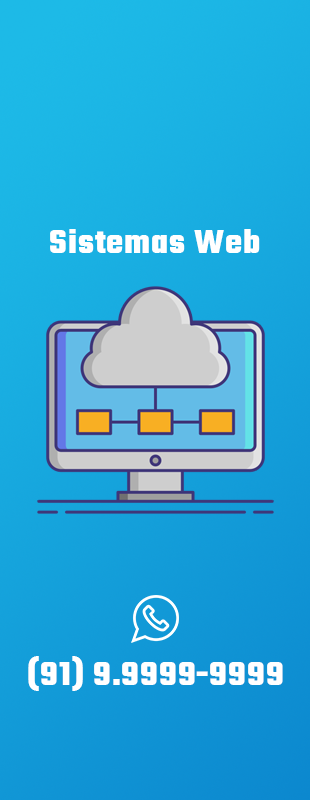
<style>
.page{position:relative;width:310px;height:800px}
.page>*{position:absolute;margin:0}
.t1{font:36px "Teko-Bold";letter-spacing:0.025em;color:#ffffff}
</style>
<div class="page">
<p class="t1" style="left:50px;top:229px;width:210px;height:24px">Sistemas Web</p>
<p class="t1" style="left:28px;top:656px;width:255px;height:35px">(91) 9.9999-9999</p>
</div>
